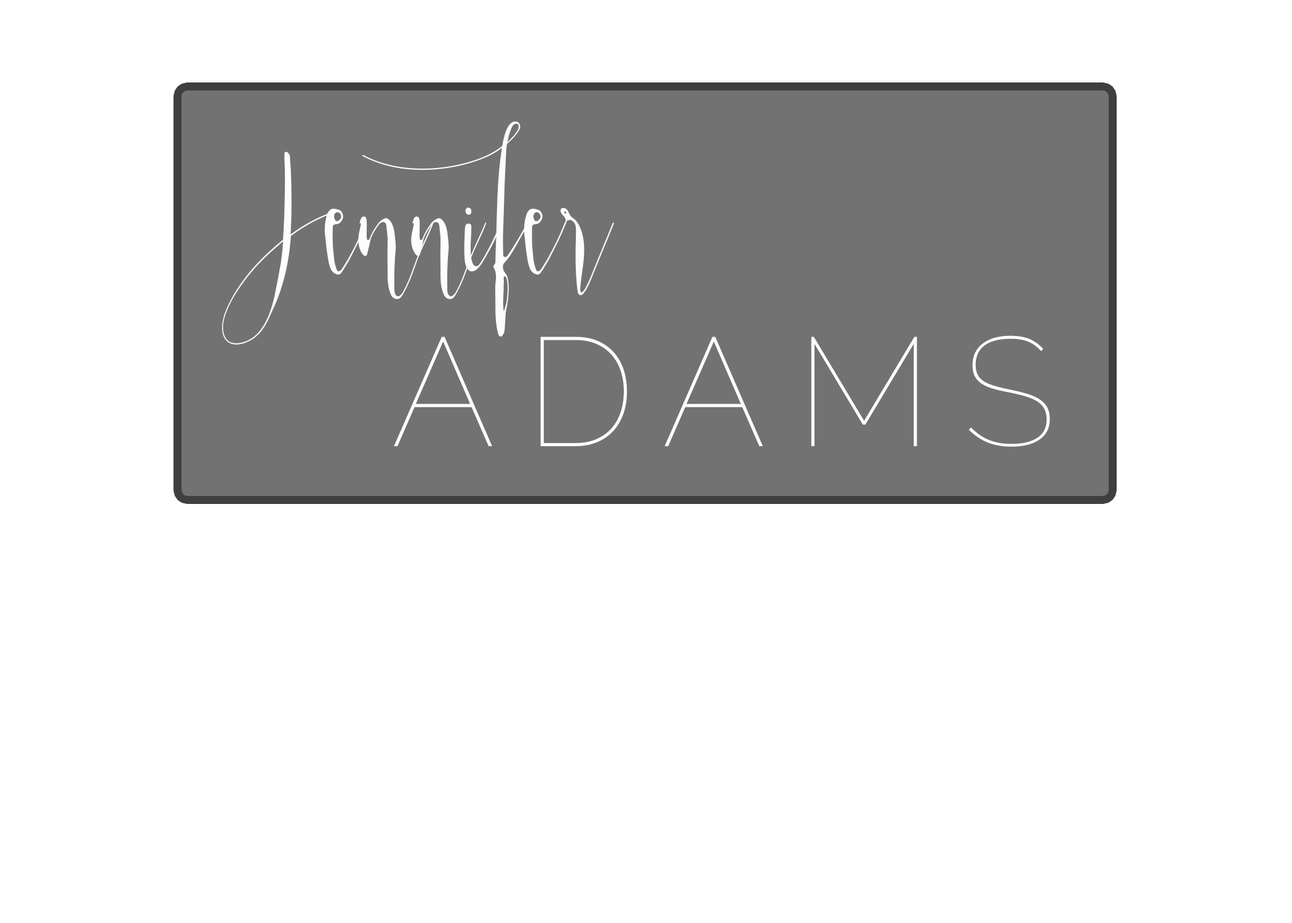
<style>
.page{position:relative;width:1292px;height:923px;background:#ffffff}
.page>*{position:absolute;margin:0}
.t1{font:153.8px "AuraBlueRegular";letter-spacing:0.2em;color:#fcfefd}
.t2{font:153.8px "Raleway-Thin";letter-spacing:0.2em;color:#fcfefd}
</style>
<div class="page">
<p class="t1" style="left:362px;top:121px;width:173px;height:216px">f</p>
<p class="t1" style="left:222px;top:151px;width:118px;height:194px">J</p>
<p class="t1" style="left:324px;top:209px;width:43px;height:66px">e</p>
<p class="t1" style="left:464px;top:207px;width:36px;height:64px">i</p>
<p class="t1" style="left:524px;top:209px;width:42px;height:66px">e</p>
<p class="t1" style="left:561px;top:207px;width:53px;height:88px">r</p>
<p class="t1" style="left:358px;top:216px;width:76px;height:83px">n</p>
<p class="t1" style="left:411px;top:216px;width:76px;height:83px">n</p>
<p class="t2" style="left:394px;top:335px;width:656px;height:112px">ADAMS</p>
</div>
